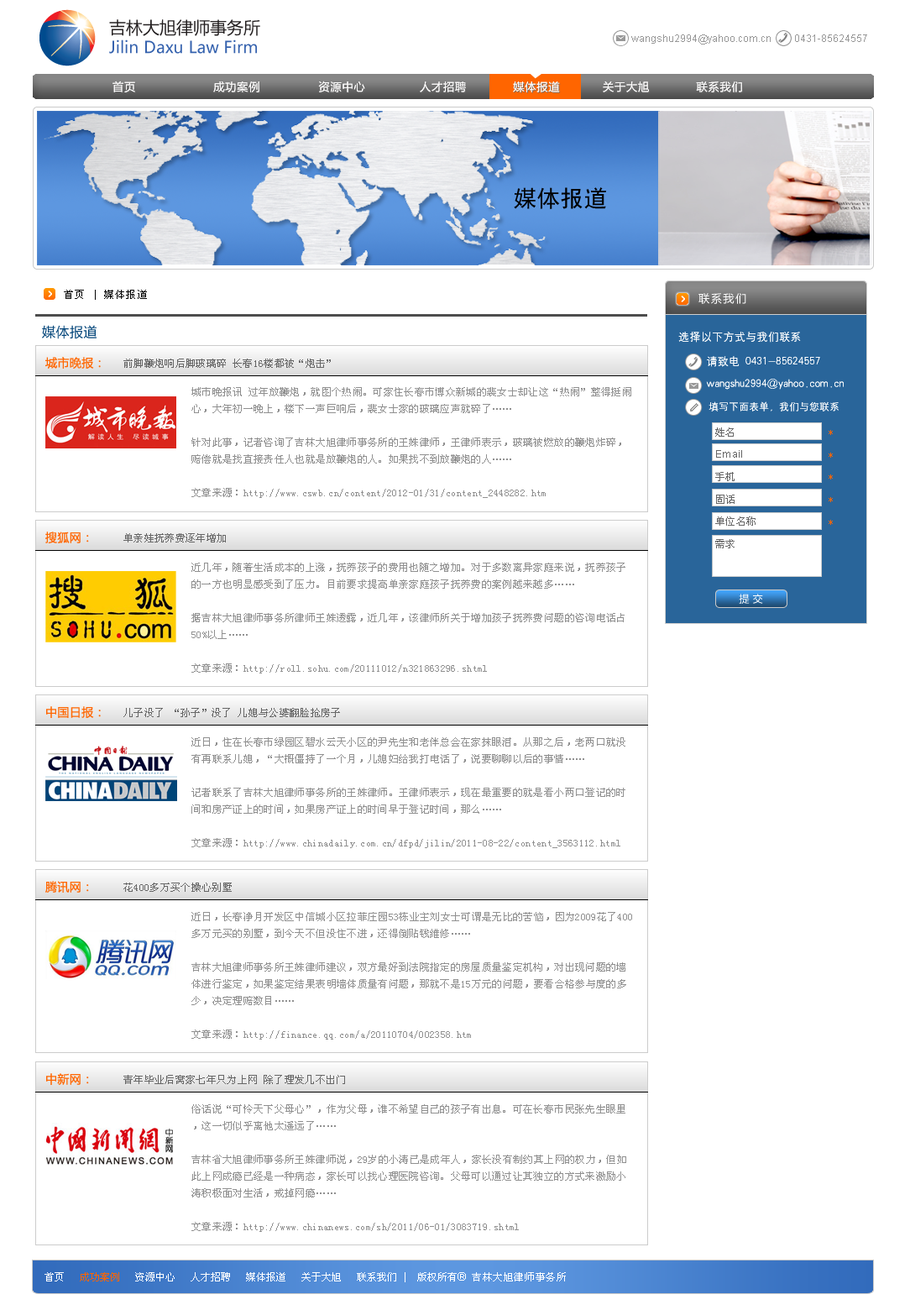
<style>
.page{position:relative;width:910px;height:1310px;background:#ffffff}
.page>*{position:absolute;margin:0}
.t1{font:16.4px "MicrosoftYaHei";color:#3562ae}
.t2{font:16.8px "MicrosoftYaHei";color:#231f20}
.t3{font:10.1px "ArialMT";color:#989898}
.t4{font:11.2px "MicrosoftYaHei";letter-spacing:0.05em;color:#fffefe}
.t5{font:23.5px "SimHei";color:#000000}
.t6{font:10.1px "SimSun";letter-spacing:0.1em;color:#000000}
.t7{font:11.2px "MicrosoftYaHei";letter-spacing:0.1em;color:#ffffff}
.t8{font:13.4px "MicrosoftYaHei";letter-spacing:0.029em;color:#004378}
.t9{font:11.2px/24.6px "HYg2gj";color:#ffffff}
.t10{font:11.2px/22.4px "HYg2gj";color:#ffffff}
.t11{font:10.1px/22.4px "HYg2gj";color:#ffffff}
.t12{font:11.8px "MicrosoftYaHei";letter-spacing:0.029em;color:#ff6600}
.t13{font:10.1px "SimSun";letter-spacing:0.029em;color:#666666}
.t14{font:10.1px/16.8px "SimSun";letter-spacing:0.029em;color:#909090}
.t15{font:10.1px/22.4px "SimSun";letter-spacing:0.029em;color:#666666}
.t16{font:10.1px/22.4px "ArialMT";letter-spacing:0.029em;color:#666666}
.t17{font:10.1px/22.4px "SimSun";letter-spacing:0.029em;color:#ff6500}
.t18{font:10.1px "MicrosoftYaHei";letter-spacing:0.029em;color:#ffffff}
.t19{font:10.1px "SimSun";color:#ffffff}
.t20{font:10.1px "SimSun";color:#ff6500}
.t21{font:11.2px "ArialMT";color:#ffffff}
.t22{font:10.1px "SimSun";letter-spacing:0.05em;color:#ffffff}
</style>
<div class="page">
<p class="t1" style="left:109px;top:19px;width:151px;height:35px"><span class="t2">吉林大旭律师事务所<br></span>Jilin Daxu Law Firm</p>
<p class="t3" style="left:631px;top:34px;width:236px;height:11px">wangshu2994@yahoo.com.cn         0431-85624557</p>
<p class="t4" style="left:113px;top:81px;width:629px;height:11px">首页                    成功案例               资源中心              人才招聘            媒体报道           关于大旭            联系我们</p>
<p class="t4" style="left:113px;top:81px;width:629px;height:11px">首页                    成功案例               资源中心              人才招聘            媒体报道           关于大旭            联系我们</p>
<p class="t5" style="left:514px;top:187px;width:92px;height:22px">媒体报道</p>
<p class="t6" style="left:64px;top:290px;width:83px;height:10px">首页 | 媒体报道</p>
<p class="t7" style="left:699px;top:293px;width:48px;height:11px">联系我们</p>
<p class="t7" style="left:699px;top:293px;width:48px;height:11px">联系我们</p>
<p class="t8" style="left:42px;top:325px;width:55px;height:14px">媒体报道</p>
<p class="t9" style="left:679px;top:332px;width:165px;height:79px">选择以下方式与我们联系<br>     请致电 0431-85624557<br><span class="t10">     wangshu2994@yahoo.com.cn<br></span><span class="t11">      填写下面表单，我们与您联系</span></p>
<p class="t9" style="left:679px;top:332px;width:165px;height:79px">选择以下方式与我们联系<br>     请致电 0431-85624557<br><span class="t10">     wangshu2994@yahoo.com.cn<br></span><span class="t11">      填写下面表单，我们与您联系</span></p>
<p class="t12" style="left:45px;top:357px;width:56px;height:12px">城市晚报：</p>
<p class="t13" style="left:123px;top:359px;width:208px;height:9px">前脚鞭炮响后脚玻璃碎 长春16楼都被“炮击”</p>
<p class="t14" style="left:191px;top:387px;width:440px;height:111px">城市晚报讯 过年放鞭炮，就图个热闹。可家住长春市博众新城的裴女士却让这“热闹”整得挺闹心，大年初一晚上，楼下一声巨响后，裴女士家的玻璃应声就碎了……<br><br>针对此事，记者咨询了吉林大旭律师事务所的王姝律师，王律师表示，玻璃被燃放的鞭炮炸碎，赔偿就是找直接责任人也就是放鞭炮的人。如果找不到放鞭炮的人……<br><br>文章来源：http://www.cswb.cn/content/2012-01/31/content_2448282.htm</p>
<p class="t15" style="left:715px;top:427px;width:41px;height:121px">姓名<br><span class="t16">Email<br></span>手机<br>固话<br>单位名称<br>需求</p>
<p class="t17" style="left:829px;top:430px;width:4px;height:95px">*<br>*<br>*<br>*<br>*</p>
<p class="t12" style="left:45px;top:532px;width:44px;height:11px">搜狐网：</p>
<p class="t13" style="left:123px;top:533px;width:103px;height:9px">单亲娃抚养费逐年增加</p>
<p class="t14" style="left:191px;top:563px;width:435px;height:110px">近几年，随着生活成本的上涨，抚养孩子的费用也随之增加。对于多数离异家庭来说，抚养孩子的一方也明显感受到了压力。目前要求提高单亲家庭孩子抚养费的案例越来越多……<br><br>据吉林大旭律师事务所律师王姝透露，近几年，该律师所关于增加孩子抚养费问题的咨询电话占50%以上……<br><br>文章来源：http://roll.sohu.com/20111012/n321863296.shtml</p>
<p class="t18" style="left:739px;top:594px;width:24px;height:10px">提 交</p>
<p class="t12" style="left:46px;top:706px;width:55px;height:12px">中国日报：</p>
<p class="t13" style="left:123px;top:708px;width:217px;height:9px">儿子没了 “孙子”没了 儿媳与公婆翻脸抢房子</p>
<p class="t14" style="left:191px;top:737px;width:435px;height:111px">近日，住在长春市绿园区碧水云天小区的尹先生和老伴总会在家抹眼泪。从那之后，老两口就没有再联系儿媳，“大概僵持了一个月，儿媳妇给我打电话了，说要聊聊以后的事情……<br><br>记者联系了吉林大旭律师事务所的王姝律师。王律师表示，现在最重要的就是看小两口登记的时间和房产证上的时间，如果房产证上的时间早于登记时间，那么……<br><br>文章来源：http://www.chinadaily.com.cn/dfpd/jilin/2011-08-22/content_3563112.html</p>
<p class="t12" style="left:45px;top:881px;width:44px;height:12px">腾讯网：</p>
<p class="t13" style="left:123px;top:883px;width:109px;height:9px">花400多万买个操心别墅</p>
<p class="t14" style="left:191px;top:912px;width:441px;height:128px">近日，长春净月开发区中信城小区拉菲庄园53栋业主刘女士可谓是无比的苦恼，因为2009花了400多万元买的别墅，到今天不但没住不进，还得倒贴钱维修……<br><br>吉林大旭律师事务所王姝律师建议，双方最好到法院指定的房屋质量鉴定机构，对出现问题的墙体进行鉴定，如果鉴定结果表明墙体质量有问题，那就不是15万元的问题，要看合格参与度的多少，决定理赔数目……<br><br>文章来源：http://finance.qq.com/a/20110704/002358.htm</p>
<p class="t12" style="left:46px;top:1073px;width:43px;height:12px">中新网：</p>
<p class="t13" style="left:123px;top:1075px;width:222px;height:9px">青年毕业后窝家七年只为上网 除了理发几不出门</p>
<p class="t14" style="left:191px;top:1104px;width:435px;height:128px">俗话说“可怜天下父母心”，作为父母，谁不希望自己的孩子有出息。可在长春市民张先生眼里，这一切似乎离他太遥远了……<br><br>吉林省大旭律师事务所王姝律师说，29岁的小涛已是成年人，家长没有制约其上网的权力，但如此上网成瘾已经是一种病态，家长可以找心理医院咨询。父母可以通过让其独立的方式来激励小涛积极面对生活，戒掉网瘾……<br><br>文章来源：http://www.chinanews.com/sh/2011/06-01/3083719.shtml</p>
<p class="t19" style="left:45px;top:1272px;width:521px;height:10px">首页   <span class="t20">成功案例 </span>  资源中心   人才招聘   媒体报道   关于大旭   联系我们 |  版权所有<span class="t21">® </span><span class="t22">吉林大旭律师事务所</span></p>
</div>
